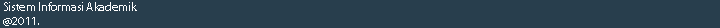
<style>
.page{position:relative;width:720px;height:28px;background:#283e4d}
.page>*{position:absolute;margin:0}
.t1{font:12px "MyriadPro-Regular";color:#ffffff}
</style>
<div class="page">
<p class="t1" style="left:3px;top:2px;width:134px;height:24px">Sistem Informasi Akademik<br>@2011.</p>
</div>
